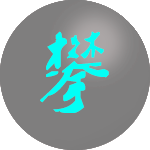
<style>
.page{position:relative;width:150px;height:150px;background:#7f7e7e}
.page>*{position:absolute;margin:0}
.t1{font:80px "2.0-";color:#02fff6}
</style>
<div class="page">
<p class="t1" style="left:40px;top:31px;width:69px;height:82px">攀</p>
</div>
